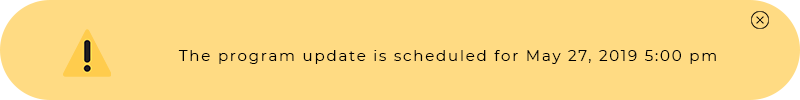
<style>
.page{position:relative;width:800px;height:100px;background:#ffdb83}
.page>*{position:absolute;margin:0}
.t1{font:15px "Montserrat-Regular";letter-spacing:0.12em;color:#000000}
</style>
<div class="page">
<p class="t1" style="left:178px;top:50px;width:538px;height:14px">The program update is scheduled for May 27, 2019 5:00 pm</p>
</div>
